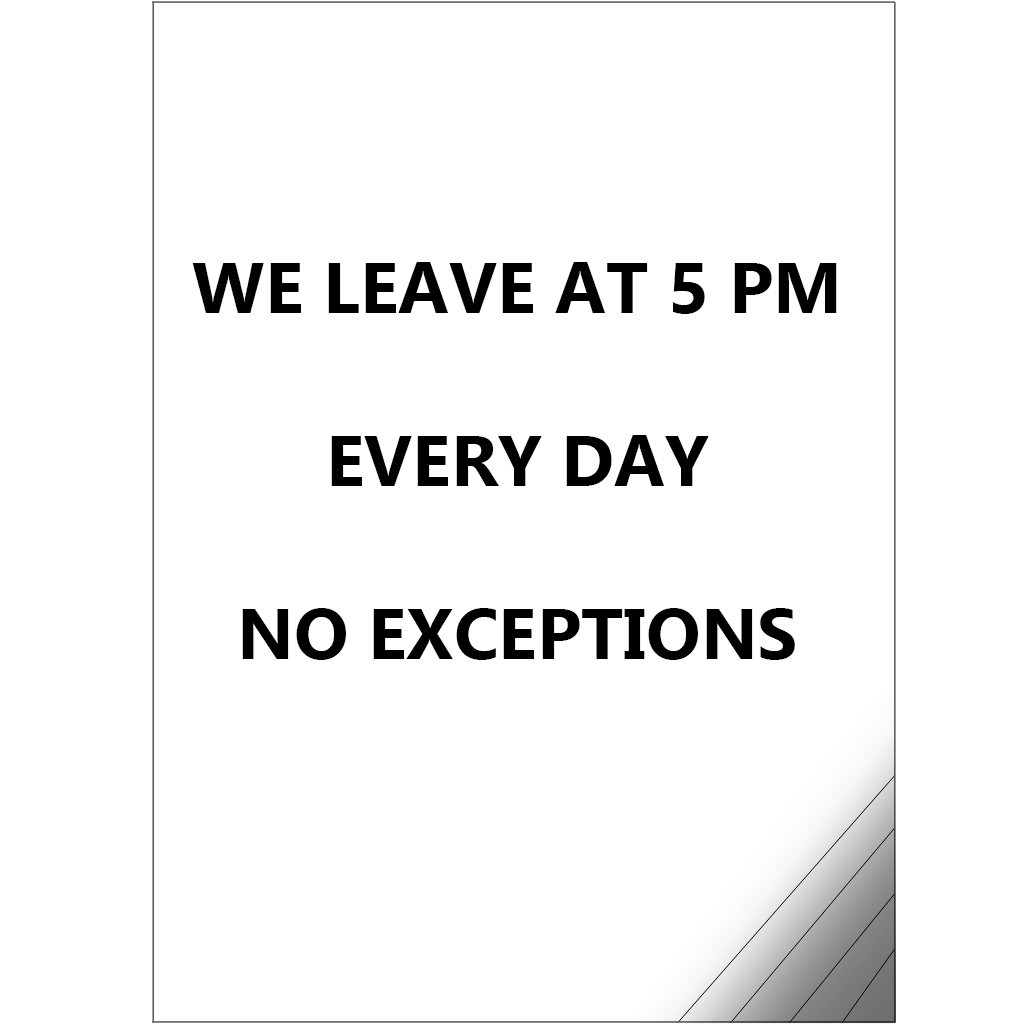
<style>
.page{position:relative;width:1024px;height:1024px;background:#ffffff}
.page>*{position:absolute;margin:0}
.t1{font:72px "Ebrima-Bold";color:#000000}
</style>
<div class="page">
<p class="t1" style="left:192px;top:262px;width:645px;height:398px;text-align:center">WE LEAVE AT 5 PM<br><br>EVERY DAY<br><br>NO EXCEPTIONS</p>
</div>
